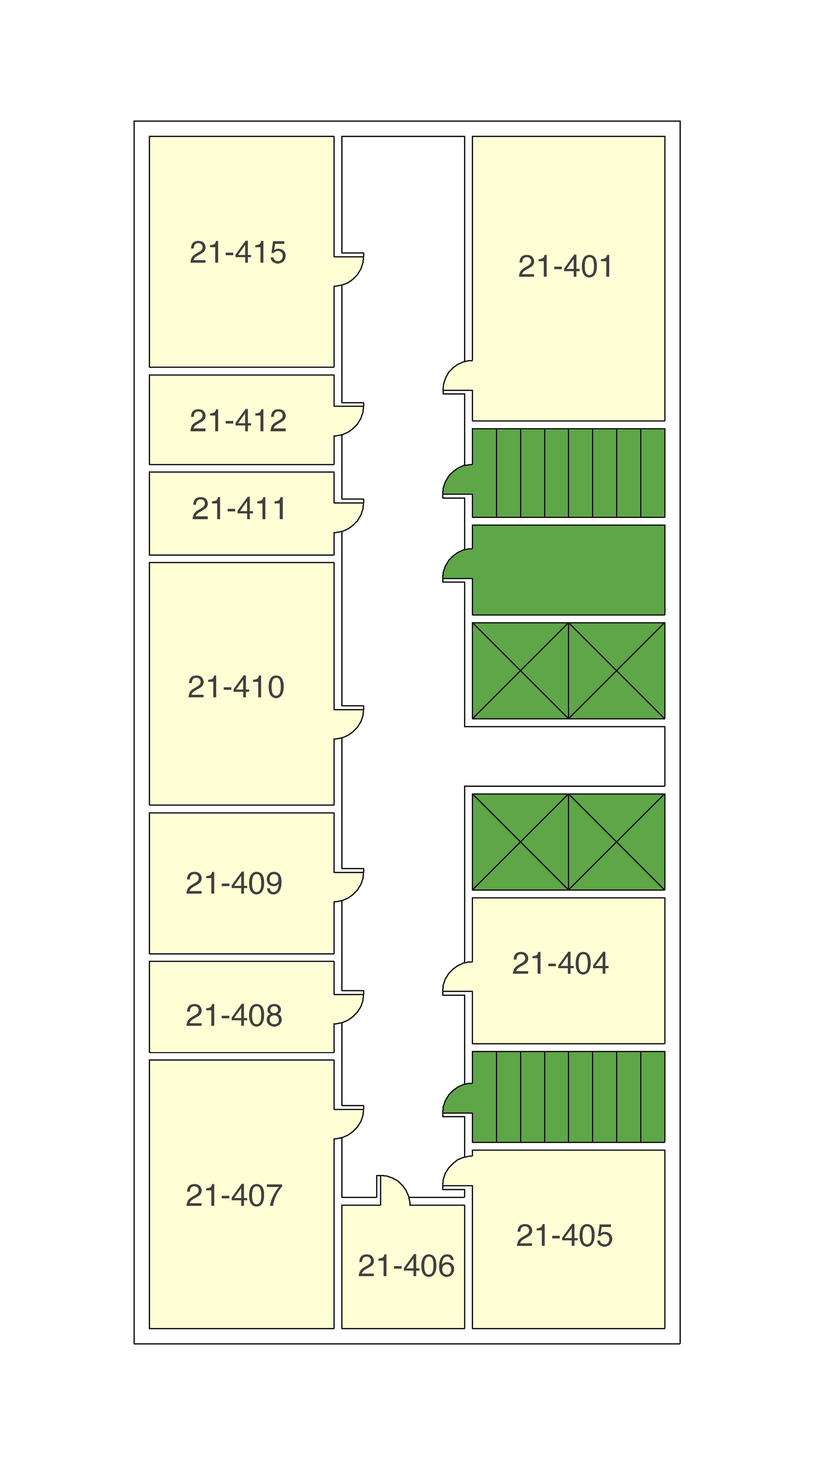
<style>
.page{position:relative;width:814px;height:1465px;background:#ffffff}
.page>*{position:absolute;margin:0}
.t1{font:31.3px "Helvetica";color:#3f3f3f}
</style>
<div class="page">
<p class="t1" style="left:190px;top:241px;width:96px;height:23px">21-415</p>
<p class="t1" style="left:519px;top:254px;width:90px;height:24px">21-401</p>
<p class="t1" style="left:190px;top:409px;width:96px;height:22px">21-412</p>
<p class="t1" style="left:192px;top:496px;width:91px;height:23px">21-411</p>
<p class="t1" style="left:188px;top:675px;width:96px;height:23px">21-410</p>
<p class="t1" style="left:186px;top:871px;width:96px;height:23px">21-409</p>
<p class="t1" style="left:513px;top:951px;width:96px;height:24px">21-404</p>
<p class="t1" style="left:186px;top:1004px;width:96px;height:23px">21-408</p>
<p class="t1" style="left:186px;top:1183px;width:96px;height:24px">21-407</p>
<p class="t1" style="left:517px;top:1224px;width:95px;height:23px">21-405</p>
<p class="t1" style="left:359px;top:1254px;width:95px;height:23px">21-406</p>
</div>
